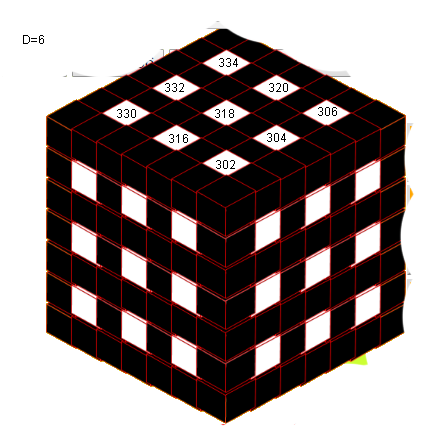
<style>
.page{position:relative;width:437px;height:446px;background:#ffffff}
.page>*{position:absolute;margin:0}
.t1{font:12px "ArialMT";color:#000000}
</style>
<div class="page">
<p class="t1" style="left:23px;top:35px;width:21px;height:9px">D=6</p>
<p class="t1" style="left:219px;top:58px;width:19px;height:9px">334</p>
<p class="t1" style="left:165px;top:83px;width:19px;height:9px">332</p>
<p class="t1" style="left:269px;top:83px;width:19px;height:9px">320</p>
<p class="t1" style="left:117px;top:109px;width:19px;height:9px">330</p>
<p class="t1" style="left:215px;top:109px;width:19px;height:9px">318</p>
<p class="t1" style="left:318px;top:107px;width:19px;height:9px">306</p>
<p class="t1" style="left:169px;top:134px;width:19px;height:9px">316</p>
<p class="t1" style="left:267px;top:133px;width:19px;height:9px">304</p>
<p class="t1" style="left:216px;top:160px;width:19px;height:9px">302</p>
</div>
